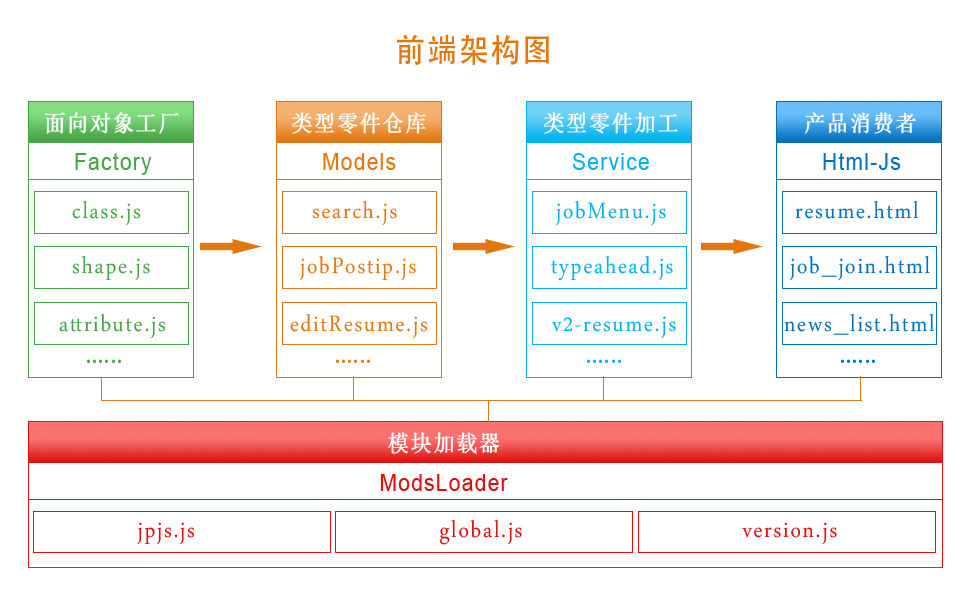
<style>
.page{position:relative;width:977px;height:593px;background:#ffffff}
.page>*{position:absolute;margin:0}
.t1{font:32.4px "AdobeHeitiStd-Regular";letter-spacing:0.06em;color:#e3770d;scale:0.93 1}
.t2{font:22.7px "SimSun";letter-spacing:0.06em;color:#ffffff;font-weight:bold;scale:0.93 1}
.t3{font:22.7px "ArialMT";letter-spacing:0.06em;color:#46a445;scale:0.93 1}
.t4{font:22.7px "ArialMT";letter-spacing:0.06em;color:#e3770d;scale:0.93 1}
.t5{font:22.7px "ArialMT";letter-spacing:0.06em;color:#00b0f0;scale:0.93 1}
.t6{font:22.7px "ArialMT";letter-spacing:0.06em;color:#0070c0;scale:0.93 1}
.t7{font:32.4px "ArabicTypesetting";letter-spacing:0.06em;color:#46a445;scale:0.93 1}
.t8{font:32.4px "ArabicTypesetting";letter-spacing:0.06em;color:#e3770d;scale:0.93 1}
.t9{font:32.4px "ArabicTypesetting";letter-spacing:0.06em;color:#00b0f0;scale:0.93 1}
.t10{font:32.4px "ArabicTypesetting";letter-spacing:0.06em;color:#0070c0;scale:0.93 1}
.t11{font:21.6px "AdobeHeitiStd-Regular";letter-spacing:0.06em;color:#46a445;scale:0.93 1}
.t12{font:21.6px "AdobeHeitiStd-Regular";letter-spacing:0.06em;color:#e3770d;scale:0.93 1}
.t13{font:21.6px "AdobeHeitiStd-Regular";letter-spacing:0.06em;color:#00b0f0;scale:0.93 1}
.t14{font:21.6px "AdobeHeitiStd-Regular";letter-spacing:0.06em;color:#0070c0;scale:0.93 1}
.t15{font:22.7px "ArialMT";letter-spacing:0.06em;color:#dd100d;scale:0.93 1}
.t16{font:32.4px "ArabicTypesetting";letter-spacing:0.06em;color:#dd100d;scale:0.93 1}
</style>
<div class="page">
<p class="t1" style="left:397px;top:34px;width:152px;height:31px">前端架构图</p>
<p class="t2" style="left:44px;top:112px;width:135px;height:22px">面向对象工厂</p>
<p class="t2" style="left:292px;top:112px;width:134px;height:22px">类型零件仓库</p>
<p class="t2" style="left:544px;top:112px;width:134px;height:22px">类型零件加工厂</p>
<p class="t2" style="left:805px;top:112px;width:111px;height:22px">产品消费者</p>
<p class="t3" style="left:75px;top:153px;width:77px;height:22px">Factory</p>
<p class="t4" style="left:323px;top:153px;width:73px;height:17px">Models</p>
<p class="t5" style="left:572px;top:153px;width:77px;height:17px">Service</p>
<p class="t6" style="left:823px;top:153px;width:78px;height:17px">Html-Js</p>
<p class="t7" style="left:72px;top:201px;width:69px;height:25px">class.js</p>
<p class="t8" style="left:312px;top:201px;width:85px;height:25px">search.js</p>
<p class="t9" style="left:555px;top:200px;width:111px;height:26px">jobMenu.js</p>
<p class="t10" style="left:795px;top:201px;width:123px;height:18px">resume.html</p>
<p class="t7" style="left:72px;top:256px;width:78px;height:25px">shape.js</p>
<p class="t8" style="left:299px;top:255px;width:117px;height:26px">jobPostip.js</p>
<p class="t9" style="left:551px;top:256px;width:122px;height:25px">typeahead.js</p>
<p class="t10" style="left:789px;top:255px;width:141px;height:26px">job_join.html</p>
<p class="t7" style="left:59px;top:313px;width:107px;height:26px">attribute.js</p>
<p class="t8" style="left:290px;top:314px;width:138px;height:25px">editResume.js</p>
<p class="t9" style="left:551px;top:316px;width:125px;height:23px">v2-resume.js</p>
<p class="t10" style="left:784px;top:314px;width:150px;height:21px">news_list.html</p>
<p class="t11" style="left:87px;top:359px;width:34px;height:4px">......</p>
<p class="t12" style="left:336px;top:359px;width:34px;height:4px">......</p>
<p class="t13" style="left:587px;top:359px;width:34px;height:4px">......</p>
<p class="t14" style="left:841px;top:359px;width:34px;height:4px">......</p>
<p class="t2" style="left:388px;top:432px;width:112px;height:22px">模块加载器</p>
<p class="t15" style="left:380px;top:474px;width:128px;height:17px">ModsLoader</p>
<p class="t16" style="left:439px;top:519px;width:83px;height:26px">global.js</p>
<p class="t16" style="left:137px;top:522px;width:58px;height:23px">jpjs.js</p>
<p class="t16" style="left:742px;top:522px;width:95px;height:23px">version.js</p>
</div>
